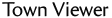
<style>
.page{position:relative;width:112px;height:18px;background:#ffffff}
.page>*{position:absolute;margin:0}
.t1{font:20px "Amira-Roman";color:#000000}
</style>
<div class="page">
<p class="t1" style="left:2px;top:2px;width:107px;height:15px;opacity:0.96">Town Viewer</p>
</div>
